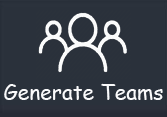
<style>
.page{position:relative;width:167px;height:117px;background:#2a313b}
.page>*{position:absolute;margin:0}
.t1{font:21px "ComicSansMS";color:#fafafb}
</style>
<div class="page">
<p class="t1" style="left:4px;top:83px;width:159px;height:17px">Generate Teams</p>
</div>
